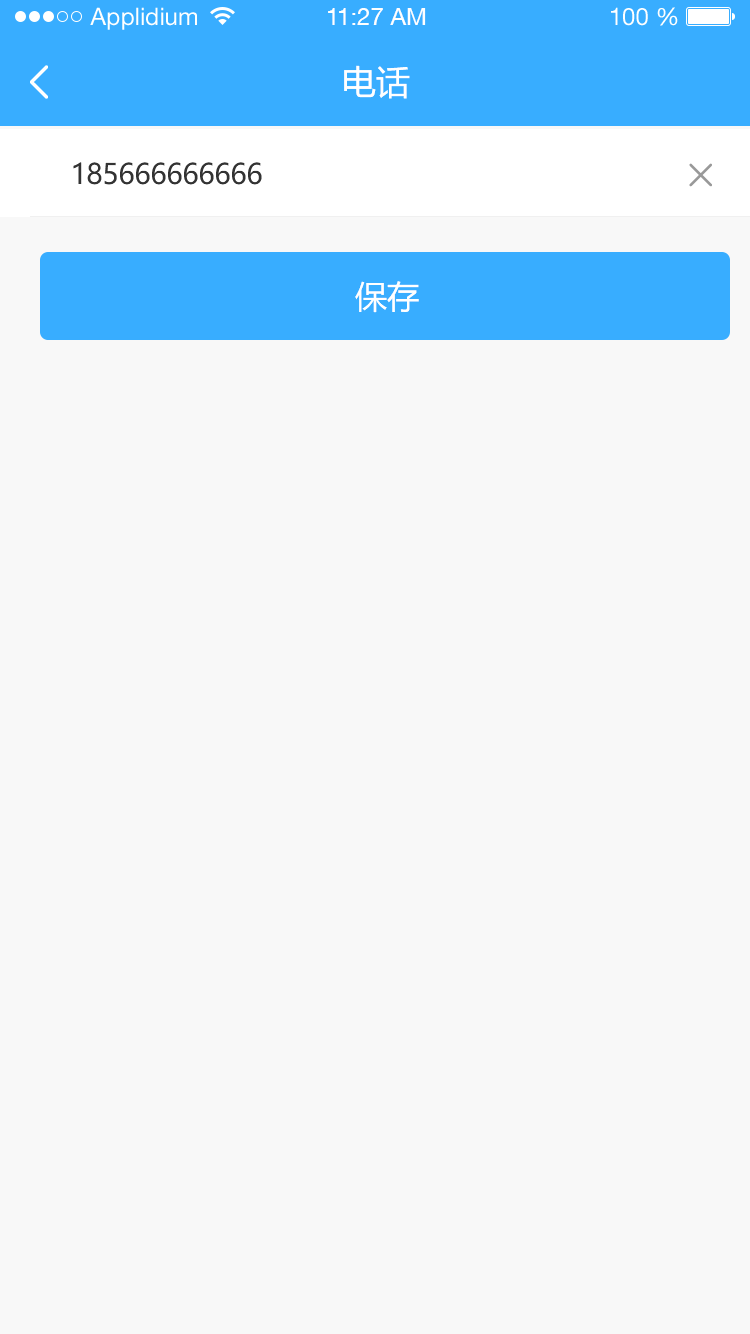
<style>
.page{position:relative;width:750px;height:1334px;background:#f8f8f8}
.page>*{position:absolute;margin:0}
.t1{font:24px "HelveticaNeueLTStd-Roman";color:#ffffff}
.t2{font:24px "HelveticaNeueCE-Roman";color:#ffffff}
.t3{font:34px "MicrosoftYaHei";color:#ffffff}
.t4{font:28px "MicrosoftYaHei";color:#333333}
.t5{font:32px "MicrosoftYaHei";color:#ffffff}
</style>
<div class="page">
<p class="t1" style="left:90px;top:7px;width:107px;height:23px">Applidium</p>
<p class="t2" style="left:328px;top:8px;width:98px;height:17px">11:27 AM</p>
<p class="t1" style="left:611px;top:7px;width:67px;height:19px">100 %</p>
<p class="t3" style="left:344px;top:65px;width:66px;height:34px">电话</p>
<p class="t4" style="left:73px;top:162px;width:189px;height:23px">185666666666</p>
<p class="t5" style="left:355px;top:281px;width:64px;height:32px">保存</p>
</div>
